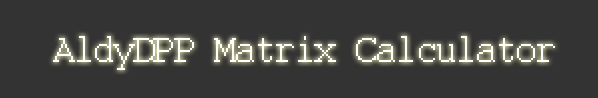
<style>
.page{position:relative;width:598px;height:98px;background:#333333}
.page>*{position:absolute;margin:0}
.t1{font:40.2px "Courier";color:#ffffff}
</style>
<div class="page">
<p class="t1" style="left:53px;top:36px;width:502px;height:34px">AldyDPP Matrix Calculator</p>
</div>
